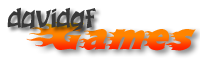
<style>
.page{position:relative;width:200px;height:60px;background:#ffffff}
.page>*{position:absolute;margin:0}
.t1{font:23.4px "Hooters-Normal";color:#393939}
.t2{font:37.5px "Blazed"}
</style>
<div class="page">
<p class="t1" style="left:7px;top:7px;width:89px;height:24px">davidgf</p>
<p class="t2" style="left:26px;top:22px;width:170px;height:29px">Games</p>
</div>
